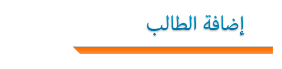
<style>
.page{position:relative;width:282px;height:69px;background:#ffffff}
.page>*{position:absolute;margin:0}
.t1{font:28px "AdobeArabic-Regular";color:#007caf}
</style>
<div class="page">
<p class="t1" style="left:147px;top:15px;width:98px;height:21px">إضافة الطالب</p>
</div>
